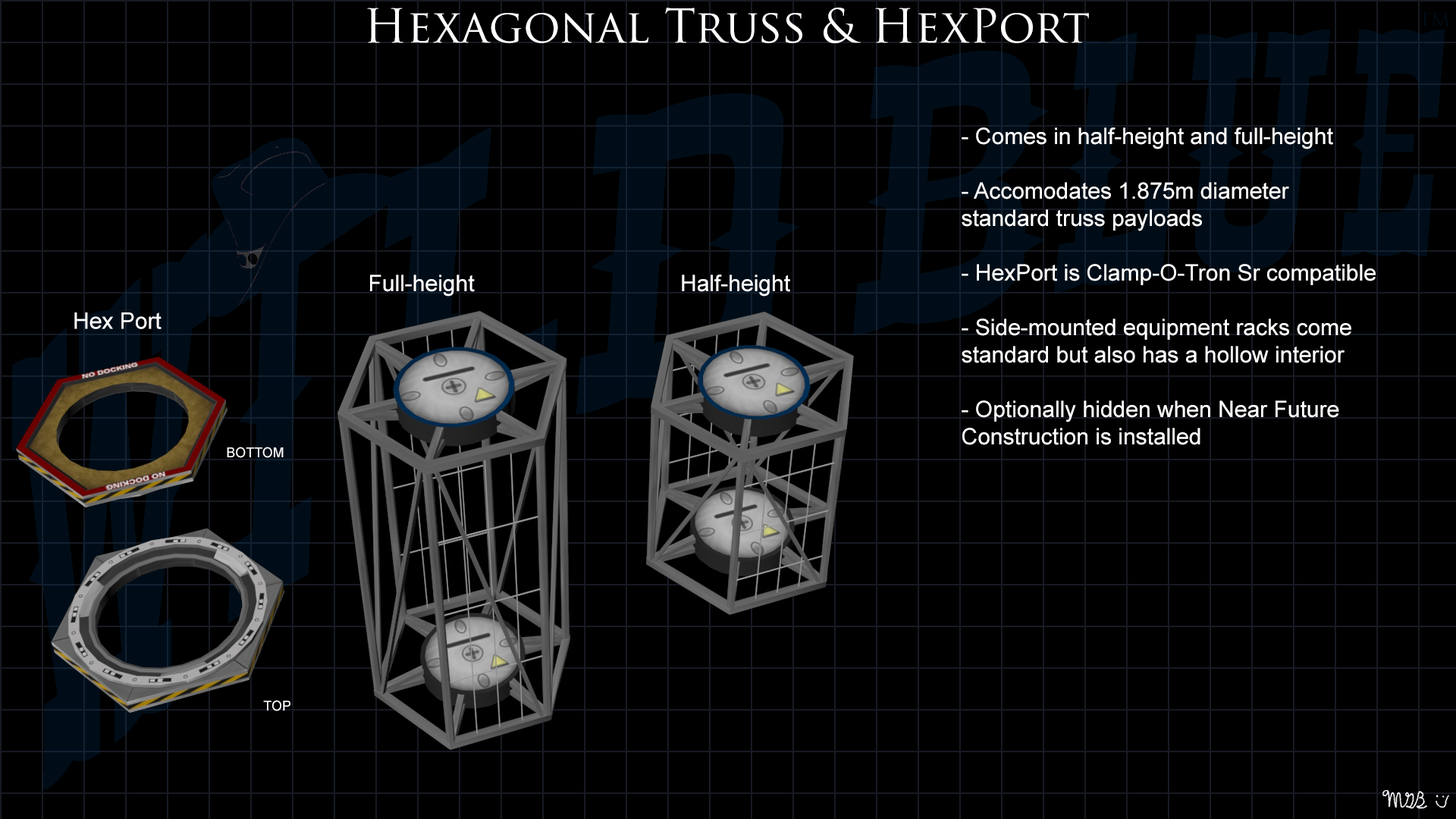
<style>
.page{position:relative;width:1456px;height:819px;background:#000000}
.page>*{position:absolute;margin:0}
.t1{font:45.5px "TrajanPro-Regular";color:#ffffff}
.t2{font:22.7px "ArialMT";color:#ffffff}
.t3{font:13.6px "ArialMT";color:#ffffff}
</style>
<div class="page">
<p class="t1" style="left:367px;top:8px;width:722px;height:35px">Hexagonal Truss &amp; HexPort</p>
<p class="t2" style="left:962px;top:127px;width:414px;height:318px">- Comes in half-height and full-height<br><br>- Accomodates 1.875m diameter<br>standard truss payloads<br><br>- HexPort is Clamp-O-Tron Sr compatible<br><br>- Side-mounted equipment racks come<br>standard but also has a hollow interior<br><br>- Optionally hidden when Near Future<br>Construction is installed</p>
<p class="t2" style="left:370px;top:275px;width:105px;height:22px">Full-height</p>
<p class="t2" style="left:682px;top:275px;width:108px;height:22px">Half-height</p>
<p class="t2" style="left:74px;top:312px;width:88px;height:17px">Hex Port</p>
<p class="t3" style="left:227px;top:447px;width:57px;height:11px">BOTTOM</p>
<p class="t3" style="left:263px;top:700px;width:27px;height:11px">TOP</p>
</div>
